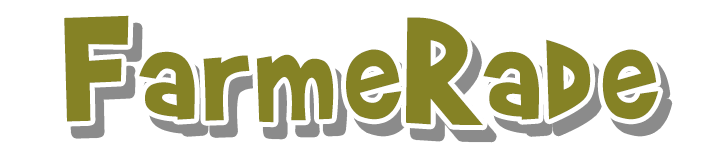
<style>
.page{position:relative;width:720px;height:150px;background:#ffffff}
.page>*{position:absolute;margin:0}
.t1{font:130px "BradyBunchRemastered";letter-spacing:0.05em;color:#858225}
.t2{font:180px "BradyBunchRemastered";letter-spacing:0.05em;color:#858225}
.t3{font:170px "BradyBunchRemastered";letter-spacing:0.05em;color:#858225}
</style>
<div class="page">
<p class="t1" style="left:64px;top:15px;width:595px;height:111px"><span class="t2">F</span>arme<span class="t3">R</span>ade</p>
</div>
